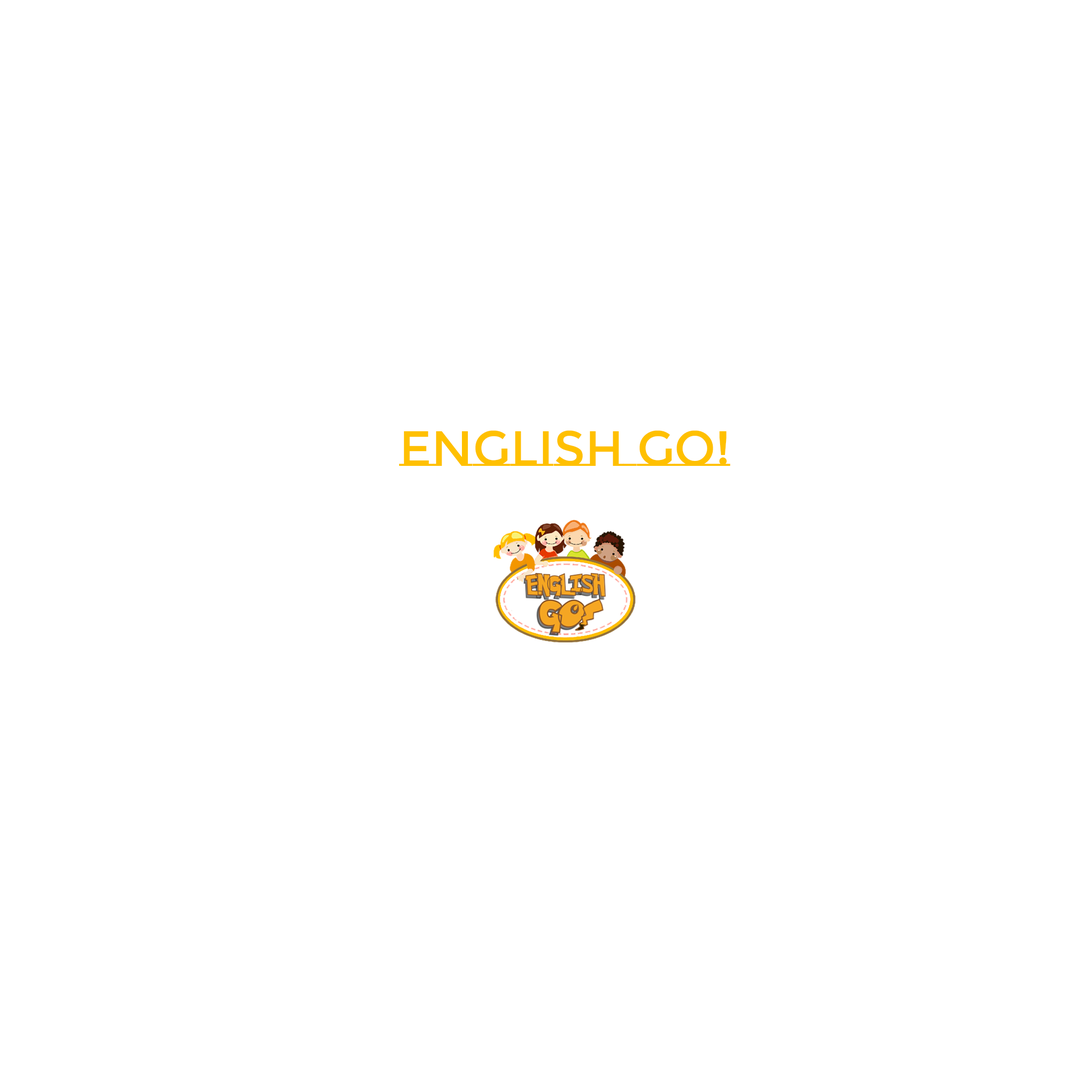
<style>
.page{position:relative;width:1092px;height:1092px;background:#ffffff}
.page>*{position:absolute;margin:0}
.t1{font:49.5px "MontserratSubrayada-Regular";color:#ffc000}
</style>
<div class="page">
<p class="t1" style="left:399px;top:430px;width:331px;height:36px">ENGLISH GO!</p>
</div>
